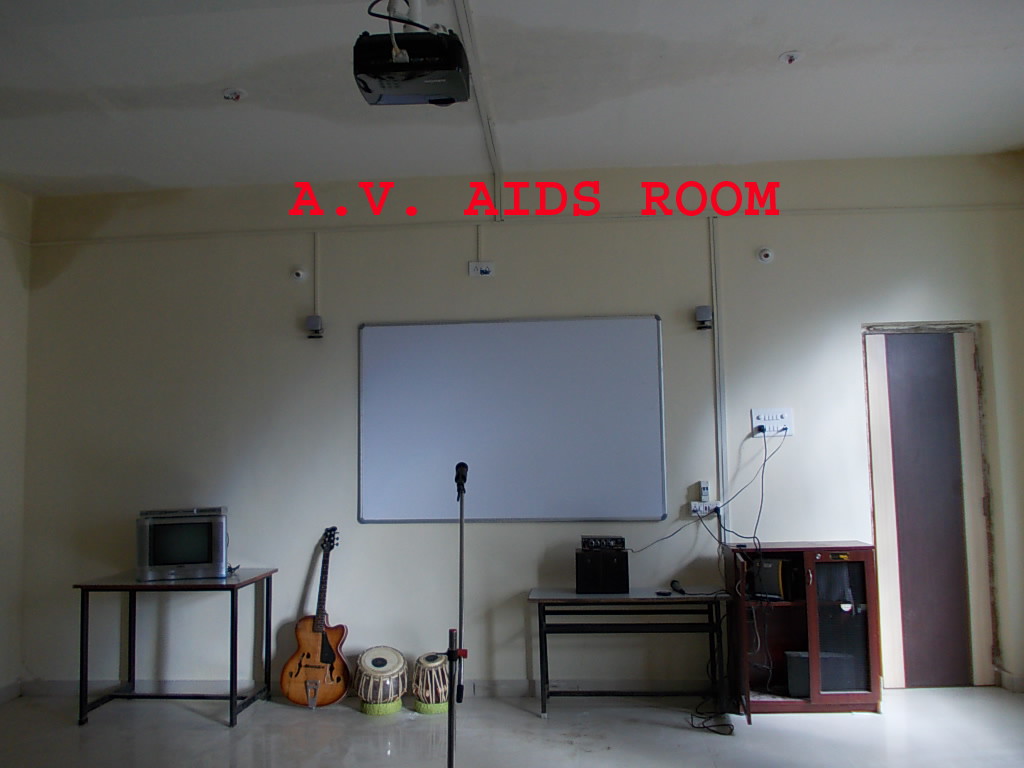
<style>
.page{position:relative;width:1024px;height:768px}
.page>*{position:absolute;margin:0}
.t1{font:58.3px "Courier-Bold";color:#f5011e}
</style>
<div class="page">
<p class="t1" style="left:289px;top:181px;width:491px;height:35px">A.V. AIDS ROOM</p>
</div>
